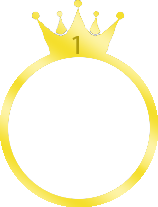
<style>
.page{position:relative;width:158px;height:207px;background:#ffffff}
.page>*{position:absolute;margin:0}
.t1{font:24px "AdobeHeitiStd-Regular";color:#b09d0c}
</style>
<div class="page">
<p class="t1" style="left:72px;top:36px;width:7px;height:18px">1</p>
</div>
